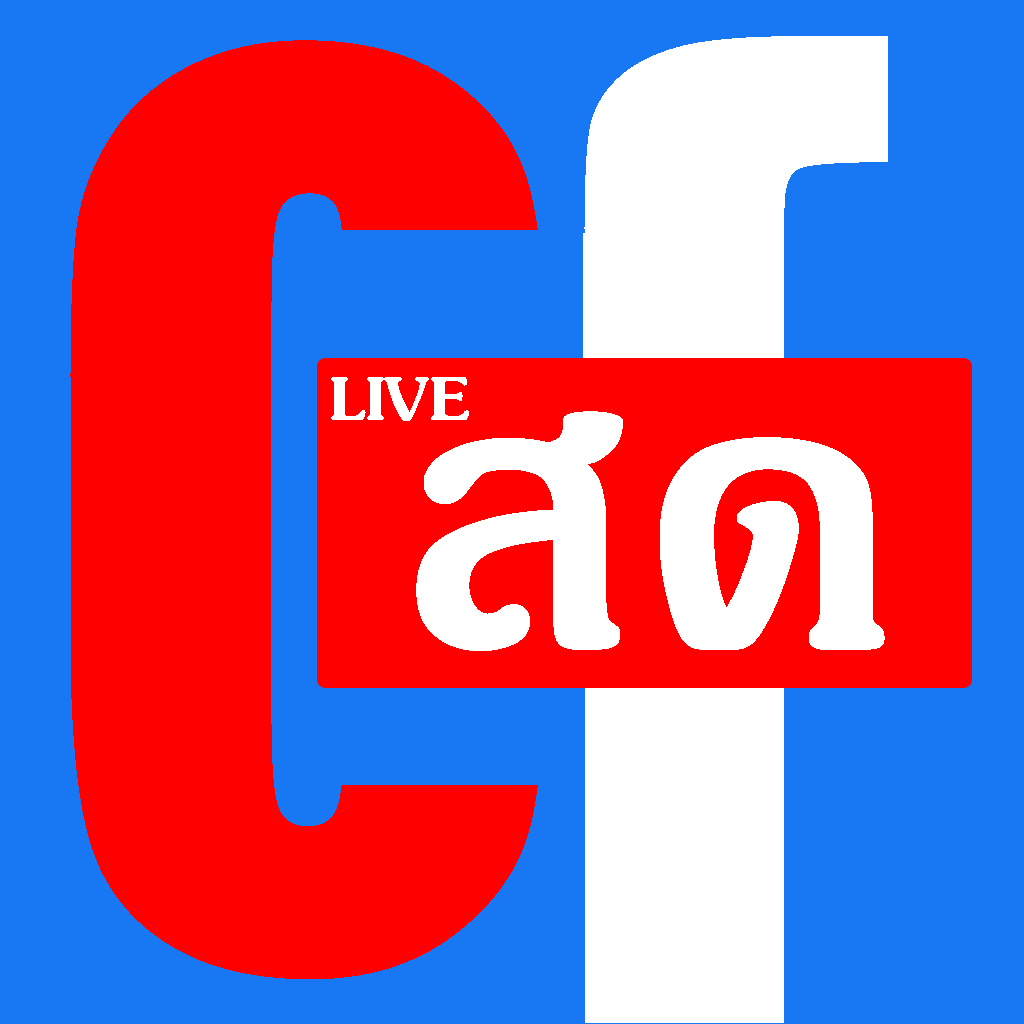
<style>
.page{position:relative;width:1024px;height:1024px;background:#1877f2}
.page>*{position:absolute;margin:0}
.t1{font:1138px "Impact";color:#ff0000;scale:0.86 1}
.t2{font:1247.3px "Impact";color:#ffffff}
.t3{font:97.5px "JasmineUPCBold";color:#ffffff}
.t4{font:524.9px "JasmineUPCBold";color:#ffffff}
</style>
<div class="page">
<p class="t1" style="left:70px;top:40px;width:475px;height:939px">C</p>
<p class="t2" style="left:535px;top:36px;width:353px;height:987px">f</p>
<p class="t3" style="left:331px;top:377px;width:138px;height:44px">LIVE</p>
<p class="t4" style="left:416px;top:411px;width:469px;height:240px">สด</p>
</div>
